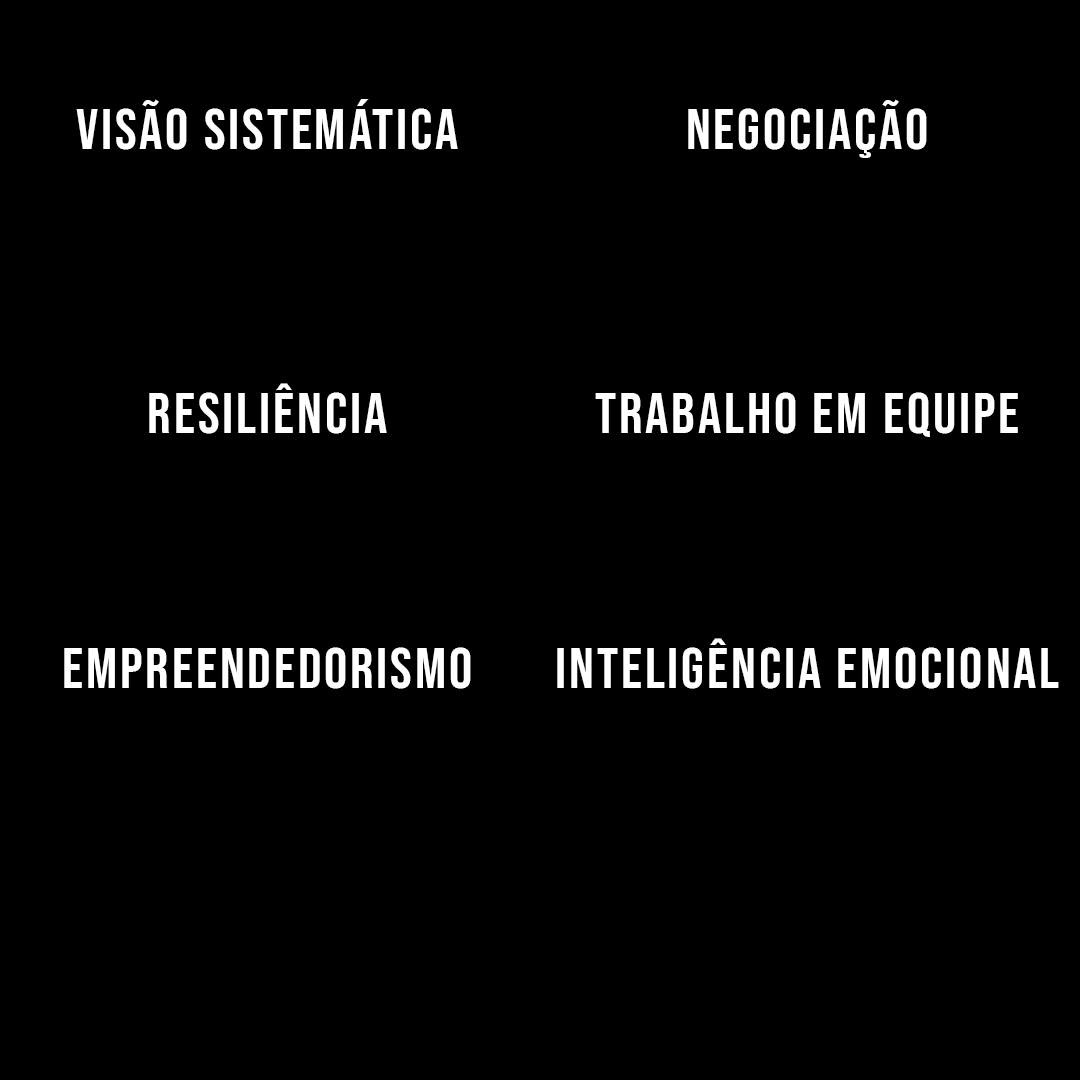
<style>
.page{position:relative;width:1080px;height:1080px;background:#000000}
.page>*{position:absolute;margin:0}
.t1{font:58px "BebasNeue-Regular";letter-spacing:0.05em;color:#ffffff}
</style>
<div class="page">
<p class="t1" style="left:76px;top:99px;width:382px;height:51px">VISÃO SISTEMÁTICA</p>
<p class="t1" style="left:688px;top:99px;width:239px;height:59px">NEGOCIAÇÃO</p>
<p class="t1" style="left:149px;top:383px;width:238px;height:51px">RESILIÊNCIA</p>
<p class="t1" style="left:595px;top:392px;width:423px;height:45px">TRABALHO EM EQUIPE</p>
<p class="t1" style="left:557px;top:638px;width:502px;height:51px">INTELIGÊNCIA EMOCIONAL</p>
<p class="t1" style="left:64px;top:647px;width:407px;height:42px">EMPREENDEDORISMO</p>
</div>
